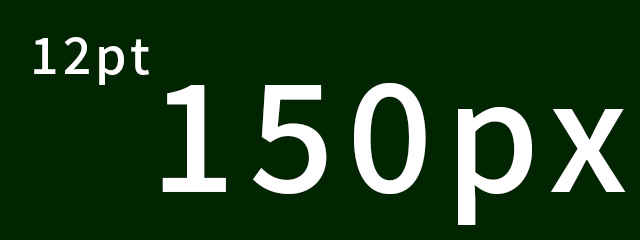
<style>
.page{position:relative;width:640px;height:240px;background:#012401}
.page>*{position:absolute;margin:0}
.t1{font:50px "SourceHanSans-Medium";letter-spacing:0.1em;color:#ffffff}
.t2{font:150px "SourceHanSans-Medium";letter-spacing:0.1em;color:#ffffff}
</style>
<div class="page">
<p class="t1" style="left:34px;top:37px;width:115px;height:48px">12pt</p>
<p class="t2" style="left:162px;top:82px;width:464px;height:143px">150px</p>
</div>
